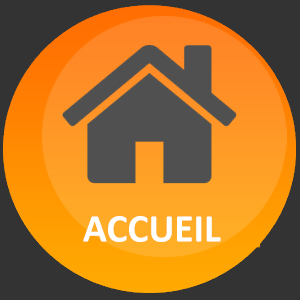
<style>
.page{position:relative;width:300px;height:300px;background:#333333}
.page>*{position:absolute;margin:0}
.t1{font:39.6px "Calibri-Bold";color:#ffffff}
</style>
<div class="page">
<p class="t1" style="left:83px;top:216px;width:138px;height:26px">ACCUEIL</p>
</div>
